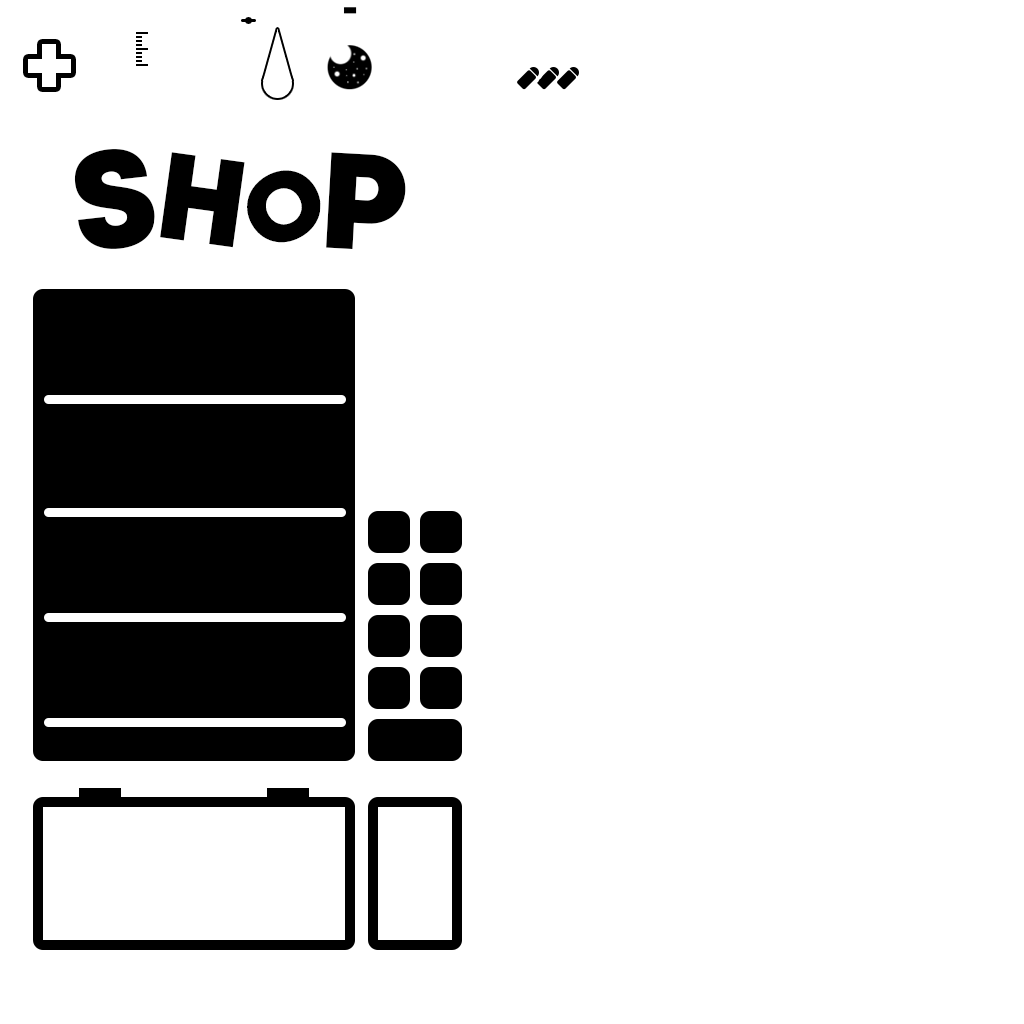
<style>
.page{position:relative;width:1024px;height:1024px;background:#ffffff}
.page>*{position:absolute;margin:0}
.t1{font:136px "Mont-HeavyDEMO";color:#000000}
.t2{font:122.3px "Mont-HeavyDEMO";color:#000000}
.t3{font:95.2px "Mont-HeavyDEMO";color:#000000}
</style>
<div class="page">
<p class="t1" style="left:74px;top:149px;width:81px;height:100px;rotate:-6deg">S</p>
<p class="t2" style="left:160px;top:152px;width:85px;height:96px;rotate:8deg">H</p>
<p class="t1" style="left:326px;top:152px;width:80px;height:97px;rotate:3deg">P</p>
<p class="t3" style="left:247px;top:170px;width:74px;height:73px;rotate:-30deg">O</p>
</div>
